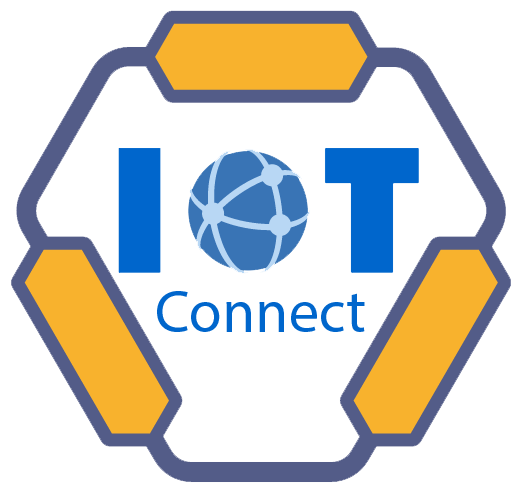
<style>
.page{position:relative;width:521px;height:493px;background:#ffffff}
.page>*{position:absolute;margin:0}
.t1{font:60px "MyriadPro-Regular";color:#0066cc}
</style>
<div class="page">
<p class="t1" style="left:157px;top:291px;width:208px;height:41px">Connect</p>
</div>
